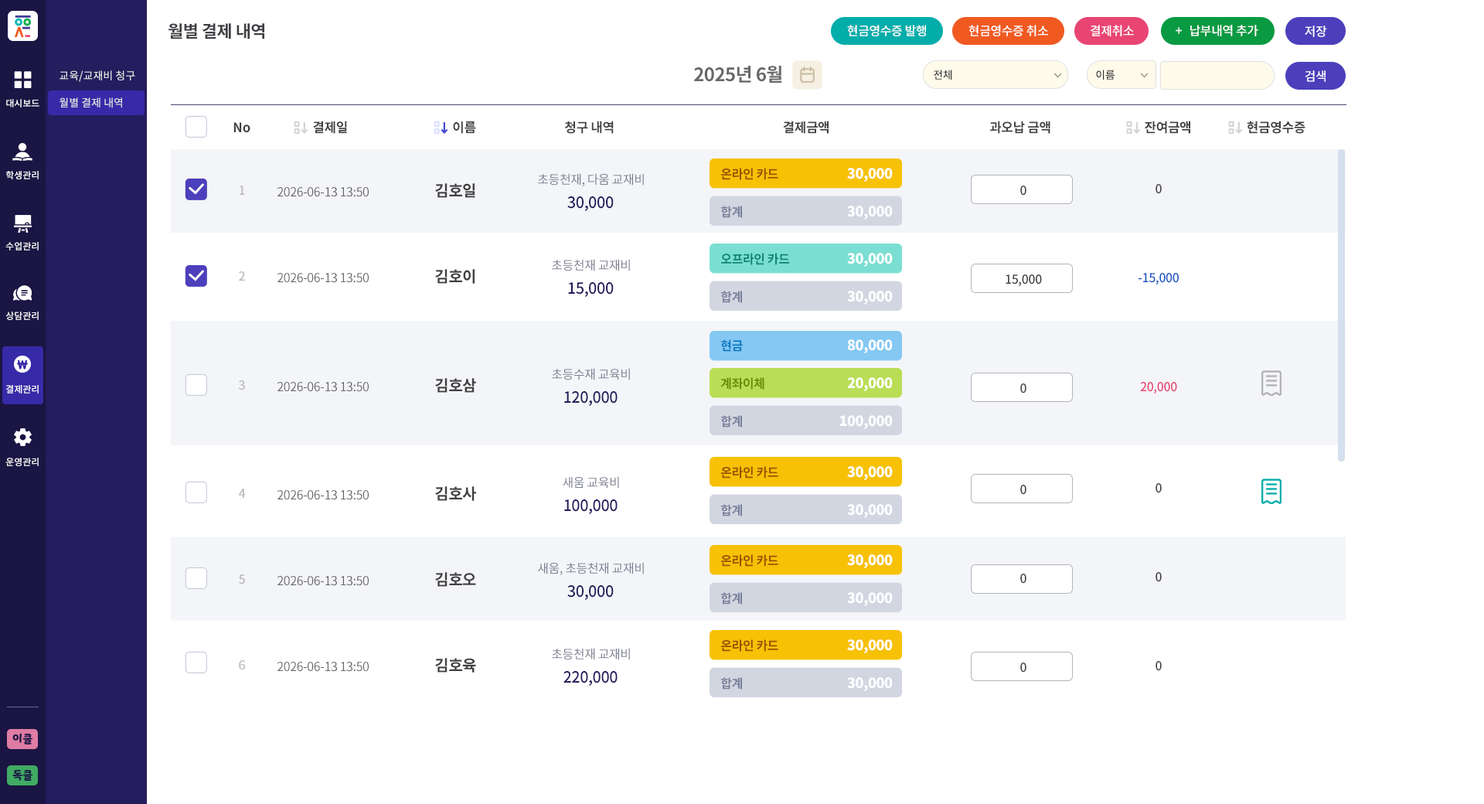
<style>
.page{position:relative;width:1484px;height:804px;background:#ffffff}
.page>*{position:absolute;margin:0}
.t1{font:17px "NotoSansCJKkr-Bold";letter-spacing:-0.025em;color:#3e3e43;text-transform:uppercase}
.t2{font:12.4px "NotoSansCJKkr-Medium";letter-spacing:-0.025em;color:#ffffff}
.t3{font:18.5px "NotoSansCJKkr-Bold";letter-spacing:-0.025em;color:#686868}
.t4{font:10.8px/27px "NotoSansCJKkr-Medium";color:#e1e1e1}
.t5{font:10.8px "NotoSansCJKkr-Medium";letter-spacing:-0.025em;color:#323232}
.t6{font:9.3px "NotoSansCJKkr-Medium";color:#ffffff}
.t7{font:13.1px "NotoSansCJKkr-Bold";letter-spacing:-0.025em;color:#404040}
.t8{font:12.4px/85.8px "NotoSansCJKkr-Regular";letter-spacing:-0.025em;color:#7b7e90}
.t9{font:12.4px/109px "NotoSansCJKkr-Regular";letter-spacing:-0.025em;color:#7b7e90}
.t10{font:12.4px/108.2px "NotoSansCJKkr-Regular";letter-spacing:-0.025em;color:#7b7e90}
.t11{font:12.4px/37.9px "NotoSansCJKkr-Bold";letter-spacing:-0.025em;color:#9b5102}
.t12{font:12.4px/37.9px "NotoSansCJKkr-Bold";letter-spacing:-0.025em;color:#78819c}
.t13{font:13.9px/37.9px "NotoSansCJKkr-Black";letter-spacing:-0.025em;color:#ffffff}
.t14{font:12.4px/85.8px "NotoSansCJKkr-Medium";letter-spacing:-0.025em;color:#a8a8a8}
.t15{font:12.4px/109px "NotoSansCJKkr-Medium";letter-spacing:-0.025em;color:#a8a8a8}
.t16{font:12.4px/108.2px "NotoSansCJKkr-Medium";letter-spacing:-0.025em;color:#a8a8a8}
.t17{font:15.5px/85.8px "NotoSansCJKkr-Bold";letter-spacing:-0.025em;color:#404040}
.t18{font:15.5px/109px "NotoSansCJKkr-Bold";letter-spacing:-0.025em;color:#404040}
.t19{font:15.5px/108.2px "NotoSansCJKkr-Bold";letter-spacing:-0.025em;color:#404040}
.t20{font:12.4px/88.9px "NotoSansCJKkr-Medium";letter-spacing:-0.025em;color:#404040}
.t21{font:12.4px/109px "NotoSansCJKkr-Medium";letter-spacing:-0.025em;color:#404040}
.t22{font:12.4px/101.2px "NotoSansCJKkr-Medium";letter-spacing:-0.025em;color:#404040}
.t23{font:12.4px/88.9px "NotoSansCJKkr-Medium";letter-spacing:-0.025em;color:#1855c5}
.t24{font:12.4px/109px "NotoSansCJKkr-Medium";letter-spacing:-0.025em;color:#e84572}
.t25{font:12.4px/85.8px "NotoSansCJKkr-Regular";letter-spacing:-0.025em;color:#646464}
.t26{font:12.4px/109px "NotoSansCJKkr-Regular";letter-spacing:-0.025em;color:#646464}
.t27{font:12.4px/108.2px "NotoSansCJKkr-Regular";letter-spacing:-0.025em;color:#646464}
.t28{font:15.5px/85.8px "NotoSansCJKkr-Medium";letter-spacing:-0.025em;color:#241d5e}
.t29{font:15.5px/109px "NotoSansCJKkr-Medium";letter-spacing:-0.025em;color:#241d5e}
.t30{font:15.5px/108.2px "NotoSansCJKkr-Medium";letter-spacing:-0.025em;color:#241d5e}
.t31{font:12.4px/37.9px "NotoSansCJKkr-Bold";letter-spacing:-0.025em;color:#0c8575}
.t32{font:12.4px/37.9px "NotoSansCJKkr-Bold";letter-spacing:-0.025em;color:#6b8c05}
.t33{font:12.4px/37.9px "NotoSansCJKkr-Bold";letter-spacing:-0.025em;color:#0678c0}
.t34{font:10.8px "YoonSoftSlime";color:#1a1543}
</style>
<div class="page">
<p class="t1" style="left:168px;top:23px;width:96px;height:16px">월별 결제 내역</p>
<p class="t2" style="left:847px;top:25px;width:79px;height:11px">현금영수증 발행</p>
<p class="t2" style="left:968px;top:25px;width:80px;height:11px">현금영수증 취소</p>
<p class="t2" style="left:1090px;top:25px;width:44px;height:11px">결제취소</p>
<p class="t2" style="left:1175px;top:25px;width:83px;height:11px">납부내역 추가</p>
<p class="t2" style="left:1304px;top:26px;width:23px;height:11px">저장</p>
<p class="t3" style="left:694px;top:66px;width:88px;height:17px">2025년 6월</p>
<p class="t4" style="left:60px;top:70px;width:75px;height:38px">교육/교재비 청구<br>월별 결제 내역</p>
<p class="t5" style="left:934px;top:70px;width:18px;height:10px">전체</p>
<p class="t5" style="left:1096px;top:70px;width:18px;height:10px">이름</p>
<p class="t2" style="left:1304px;top:70px;width:21px;height:12px">검색</p>
<p class="t6" style="left:6px;top:99px;width:33px;height:8px">대시보드</p>
<p class="t7" style="left:233px;top:122px;width:17px;height:11px">No</p>
<p class="t7" style="left:313px;top:121px;width:34px;height:13px">결제일</p>
<p class="t7" style="left:453px;top:121px;width:23px;height:13px">이름</p>
<p class="t7" style="left:565px;top:121px;width:49px;height:13px">청구 내역</p>
<p class="t7" style="left:783px;top:121px;width:45px;height:13px">결제금액</p>
<p class="t7" style="left:990px;top:121px;width:60px;height:13px">과오납 금액</p>
<p class="t7" style="left:1144px;top:121px;width:46px;height:13px">잔여금액</p>
<p class="t7" style="left:1246px;top:121px;width:59px;height:13px">현금영수증</p>
<p class="t6" style="left:6px;top:171px;width:33px;height:8px">학생관리</p>
<p class="t8" style="left:538px;top:173px;width:106px;height:487px;text-align:center">초등천재, 다움 교재비<br>초등천재 교재비<br><span class="t9">초등수재 교육비<br></span><span class="t10">새움 교육비<br></span>새움, 초등천재 교재비<br>초등천재 교재비</p>
<p class="t11" style="left:721px;top:168px;width:57px;height:50px">온라인 카드<br><span class="t12">합계</span></p>
<p class="t13" style="left:847px;top:168px;width:46px;height:51px;text-align:right">30,000<br>30,000</p>
<p class="t14" style="left:238px;top:185px;width:8px;height:485px;text-align:center;opacity:0.8">1<br>2<br><span class="t15">3<br></span><span class="t16">4<br></span>5<br>6</p>
<p class="t17" style="left:435px;top:183px;width:41px;height:489px">김호일<br>김호이<br><span class="t18">김호삼<br></span><span class="t19">김호사<br></span>김호오<br>김호육</p>
<p class="t20" style="left:1005px;top:185px;width:37px;height:487px;text-align:center">0<br>15,000<br><span class="t21">0<br></span><span class="t22">0<br></span>0<br>0</p>
<p class="t23" style="left:1138px;top:184px;width:40px;height:487px;text-align:center"><span class="t20">0<br></span>-15,000<br><span class="t24">20,000<br></span><span class="t22">0<br></span><span class="t20">0<br>0</span></p>
<p class="t25" style="left:277px;top:187px;width:92px;height:485px;text-align:center">2026-06-13 13:50<br>2026-06-13 13:50<br><span class="t26">2026-06-13 13:50<br></span><span class="t27">2026-06-13 13:50<br></span>2026-06-13 13:50<br>2026-06-13 13:50</p>
<p class="t28" style="left:563px;top:196px;width:54px;height:489px;text-align:center">30,000<br>15,000<br><span class="t29">120,000<br></span><span class="t30">100,000<br></span>30,000<br>220,000</p>
<p class="t6" style="left:5px;top:242px;width:34px;height:8px">수업관리</p>
<p class="t31" style="left:721px;top:253px;width:69px;height:50px">오프라인 카드<br><span class="t12">합계</span></p>
<p class="t13" style="left:847px;top:253px;width:46px;height:51px;text-align:right">30,000<br>30,000</p>
<p class="t6" style="left:5px;top:311px;width:34px;height:9px">상담관리</p>
<p class="t32" style="left:720px;top:339px;width:44px;height:88px"><span class="t33">현금<br></span>계좌이체<br><span class="t12">합계</span></p>
<p class="t13" style="left:840px;top:339px;width:53px;height:90px;text-align:right">80,000<br>20,000<br>100,000</p>
<p class="t6" style="left:6px;top:385px;width:33px;height:8px">결제관리</p>
<p class="t6" style="left:5px;top:457px;width:34px;height:9px">운영관리</p>
<p class="t11" style="left:721px;top:466px;width:57px;height:50px">온라인 카드<br><span class="t12">합계</span></p>
<p class="t13" style="left:847px;top:466px;width:46px;height:52px;text-align:right">30,000<br>30,000</p>
<p class="t11" style="left:721px;top:554px;width:57px;height:50px">온라인 카드<br><span class="t12">합계</span></p>
<p class="t13" style="left:847px;top:554px;width:46px;height:52px;text-align:right">30,000<br>30,000</p>
<p class="t11" style="left:721px;top:639px;width:57px;height:50px">온라인 카드<br><span class="t12">합계</span></p>
<p class="t13" style="left:847px;top:639px;width:46px;height:52px;text-align:right">30,000<br>30,000</p>
<p class="t34" style="left:12px;top:733px;width:20px;height:11px">이클</p>
<p class="t34" style="left:12px;top:770px;width:20px;height:10px">독클</p>
</div>
